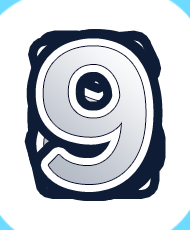
<style>
.page{position:relative;width:190px;height:230px;background:#ffffff}
.page>*{position:absolute;margin:0}
.t1{font:166.7px "RocknRollOne-Regular";font-weight:bold}
</style>
<div class="page">
<p class="t1" style="left:43px;top:46px;width:103px;height:138px">9</p>
</div>
